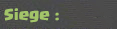
<style>
.page{position:relative;width:117px;height:29px}
.page>*{position:absolute;margin:0}
.t1{font:12px "Supercell-Magic";color:#a3c469}
</style>
<div class="page">
<p class="t1" style="left:4px;top:8px;width:55px;height:15px">Siege :</p>
</div>
